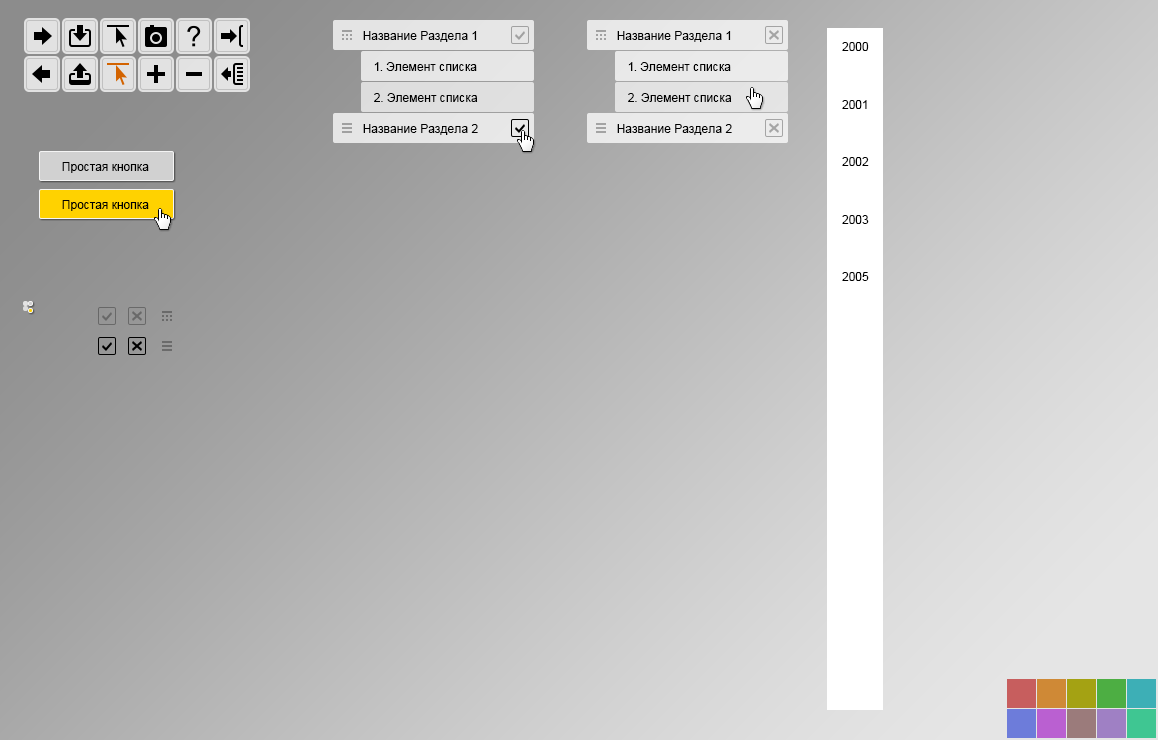
<style>
.page{position:relative;width:1158px;height:740px}
.page>*{position:absolute;margin:0}
.t1{font:12px "ArialMT";color:#000000}
</style>
<div class="page">
<p class="t1" style="left:363px;top:31px;width:114px;height:11px">Название Раздела 1</p>
<p class="t1" style="left:617px;top:31px;width:114px;height:11px">Название Раздела 1</p>
<p class="t1" style="left:842px;top:42px;width:27px;height:239px">2000<br><br><br><br>2001<br><br><br><br>2002<br><br><br><br>2003<br><br><br><br>2005</p>
<p class="t1" style="left:374px;top:62px;width:103px;height:9px">1. Элемент списка</p>
<p class="t1" style="left:628px;top:62px;width:103px;height:9px">1. Элемент списка</p>
<p class="t1" style="left:374px;top:93px;width:104px;height:9px">2. Элемент списка</p>
<p class="t1" style="left:628px;top:93px;width:104px;height:9px">2. Элемент списка</p>
<p class="t1" style="left:363px;top:124px;width:115px;height:11px">Название Раздела 2</p>
<p class="t1" style="left:617px;top:124px;width:115px;height:11px">Название Раздела 2</p>
<p class="t1" style="left:62px;top:162px;width:87px;height:11px">Простая кнопка</p>
<p class="t1" style="left:62px;top:200px;width:87px;height:11px">Простая кнопка</p>
</div>
